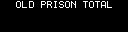
<style>
.page{position:relative;width:128px;height:32px;background:#000000}
.page>*{position:absolute;margin:0}
.t1{font:10px "Terminal";letter-spacing:-0.125em;color:#ffffff}
</style>
<div class="page">
<p class="t1" style="left:16px;top:1px;width:60px;height:7px">OLD PRISON</p>
</div>
